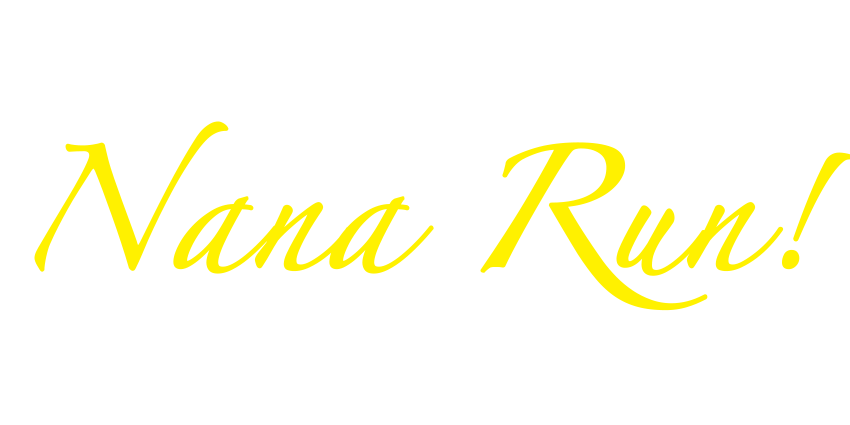
<style>
.page{position:relative;width:850px;height:425px;background:#ffffff}
.page>*{position:absolute;margin:0}
.t1{font:110px/24px "Zapfino";color:#fff100;font-weight:bold}
</style>
<div class="page">
<p class="t1" style="left:34px;top:121px;width:818px;height:190px;text-align:center">Nana Run!</p>
</div>
